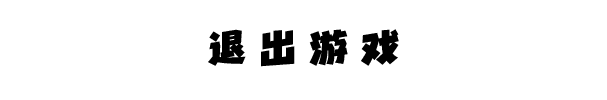
<style>
.page{position:relative;width:607px;height:100px;background:#ffffff}
.page>*{position:absolute;margin:0}
.t1{font:37.5px "HGGHT";letter-spacing:0.36em;color:#000000}
</style>
<div class="page">
<p class="t1" style="left:208px;top:29px;width:191px;height:38px">退出游戏</p>
</div>
